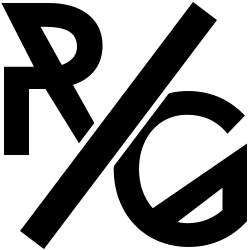
<style>
.page{position:relative;width:250px;height:250px;background:#ffffff}
.page>*{position:absolute;margin:0}
.t1{font:216.7px "NeptuneTrial-Bold";letter-spacing:0.1em;color:#000000}
</style>
<div class="page">
<p class="t1" style="left:1px;top:3px;width:112px;height:152px">r</p>
<p class="t1" style="left:113px;top:91px;width:134px;height:156px">g</p>
</div>
